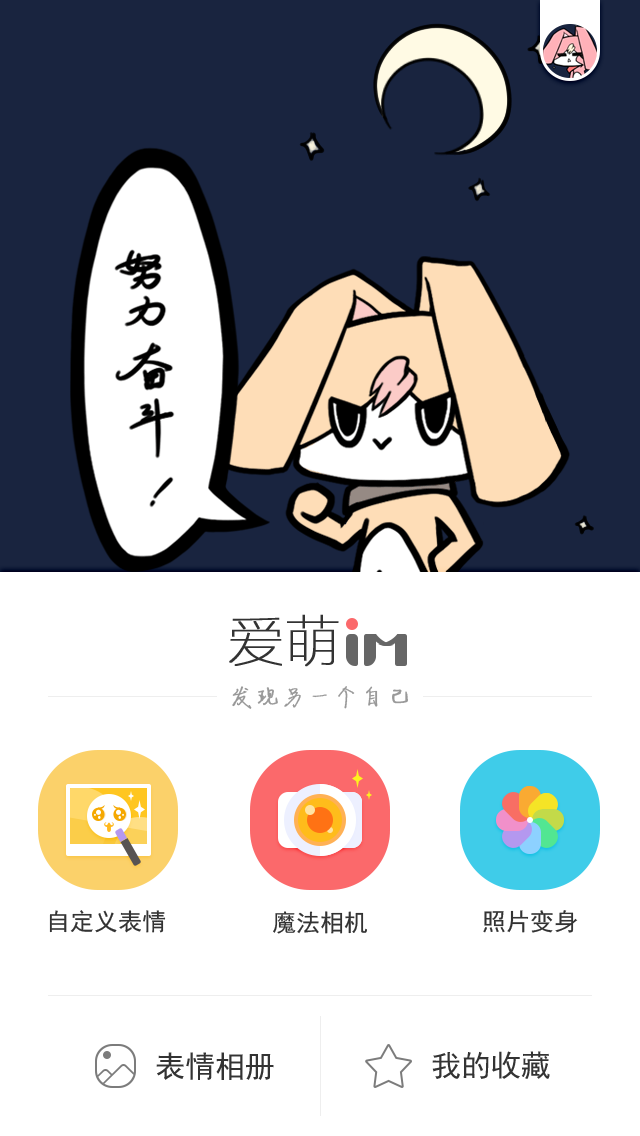
<style>
.page{position:relative;width:640px;height:1136px;background:#ffffff}
.page>*{position:absolute;margin:0}
.t1{font:56px "FZLTCXHJW--GB1-0";color:#333333;font-weight:bold}
.t2{font:24px "FZJLJW--GB1-0";letter-spacing:0.05em;color:#999999;font-weight:bold}
.t3{font:24.1px "SimHei";color:#333333}
.t4{font:30px "SimHei";color:#333333}
</style>
<div class="page">
<p class="t1" style="left:229px;top:614px;width:110px;height:53px">爱萌</p>
<p class="t2" style="left:232px;top:686px;width:176px;height:23px">发现另一个自己</p>
<p class="t3" style="left:49px;top:910px;width:117px;height:23px">自定义表情</p>
<p class="t3" style="left:273px;top:911px;width:94px;height:23px">魔法相机</p>
<p class="t3" style="left:483px;top:910px;width:95px;height:23px">照片变身</p>
<p class="t4" style="left:156px;top:1052px;width:118px;height:28px">表情相册</p>
<p class="t4" style="left:432px;top:1051px;width:118px;height:28px">我的收藏</p>
</div>
